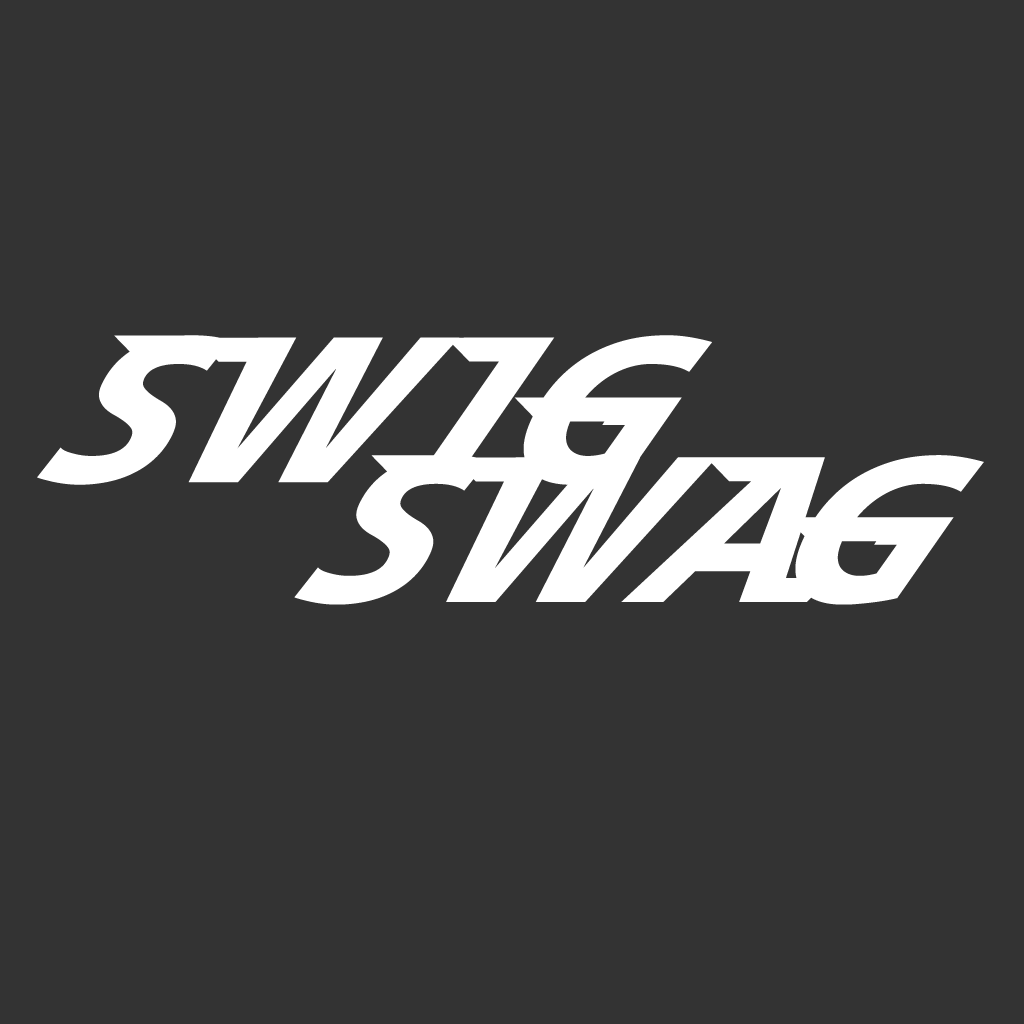
<style>
.page{position:relative;width:1024px;height:1024px;background:#333333}
.page>*{position:absolute;margin:0}
.t1{font:200px "Speedy12";color:#ffffff}
</style>
<div class="page">
<p class="t1" style="left:37px;top:335px;width:675px;height:150px">SWIG</p>
<p class="t1" style="left:294px;top:455px;width:690px;height:150px">SWAG</p>
</div>
